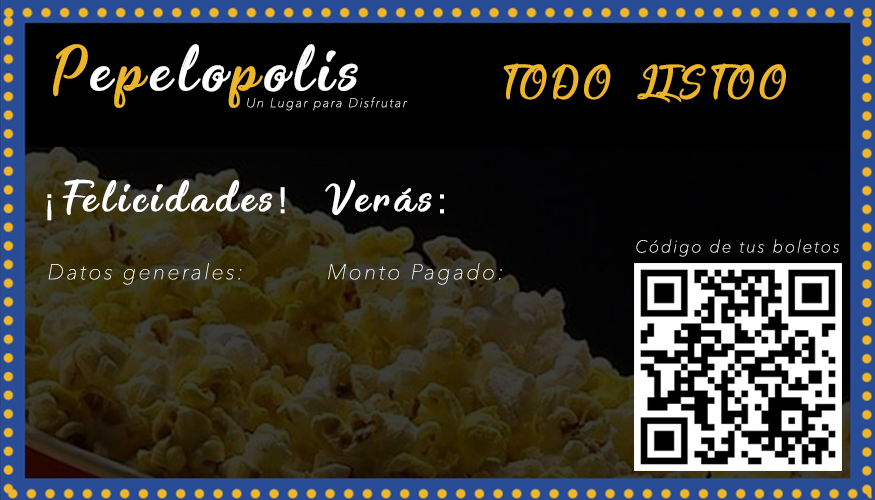
<style>
.page{position:relative;width:875px;height:500px;background:#000000}
.page>*{position:absolute;margin:0}
.t1{font:53.3px "Enchanting-Celebrations";letter-spacing:0.12em;color:#ffffff}
.t2{font:53.3px "Enchanting-Celebrations";letter-spacing:0.12em;color:#ecb52a}
.t3{font:36px "Enchanting-Celebrations";letter-spacing:0.12em;color:#ecb52a}
.t4{font:12.5px "AvenirNext-UltraLightItalic";letter-spacing:0.12em;color:#ffffff}
.t5{font:36px "Enchanting-Celebrations";letter-spacing:0.12em;color:#ffffff}
.t6{font:36px "Helvetica";letter-spacing:0.12em;color:#ffffff}
.t7{font:16.7px "AvenirNext-UltraLightItalic";letter-spacing:0.12em;color:#ffffff}
.t8{font:21.3px "AvenirNext-UltraLightItalic";letter-spacing:0.12em;color:#ffffff}
</style>
<div class="page">
<p class="t1" style="left:53px;top:44px;width:305px;height:64px"><span class="t2">P</span>e<span class="t2">p</span>elo<span class="t2">p</span>olis</p>
<p class="t3" style="left:503px;top:63px;width:283px;height:40px">TODO LISTOO</p>
<p class="t4" style="left:247px;top:97px;width:160px;height:14px">Un Lugar para Disfrutar</p>
<p class="t5" style="left:47px;top:179px;width:397px;height:42px">¡<span class="t6">¡</span>Felicidades<span class="t6">!</span>! Verás<span class="t6">:</span>:</p>
<p class="t7" style="left:636px;top:239px;width:203px;height:18px">Código de tus boletos</p>
<p class="t8" style="left:48px;top:263px;width:194px;height:22px">Datos generales:</p>
<p class="t8" style="left:328px;top:263px;width:174px;height:22px">Monto Pagado:</p>
</div>
